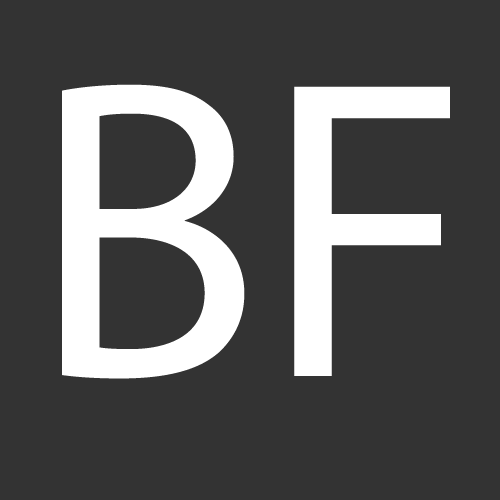
<style>
.page{position:relative;width:500px;height:500px;background:#333333}
.page>*{position:absolute;margin:0}
.t1{font:428.6px "MyriadPro-Regular";color:#ffffff}
</style>
<div class="page">
<p class="t1" style="left:62px;top:84px;width:388px;height:295px">BF</p>
</div>
